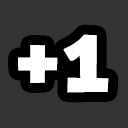
<style>
.page{position:relative;width:128px;height:128px;background:#333333}
.page>*{position:absolute;margin:0}
.t1{font:76.4px "VoodooCasual-Bold";color:#ffffff;font-weight:bold}
</style>
<div class="page">
<p class="t1" style="left:18px;top:34px;width:91px;height:59px">+1</p>
</div>
